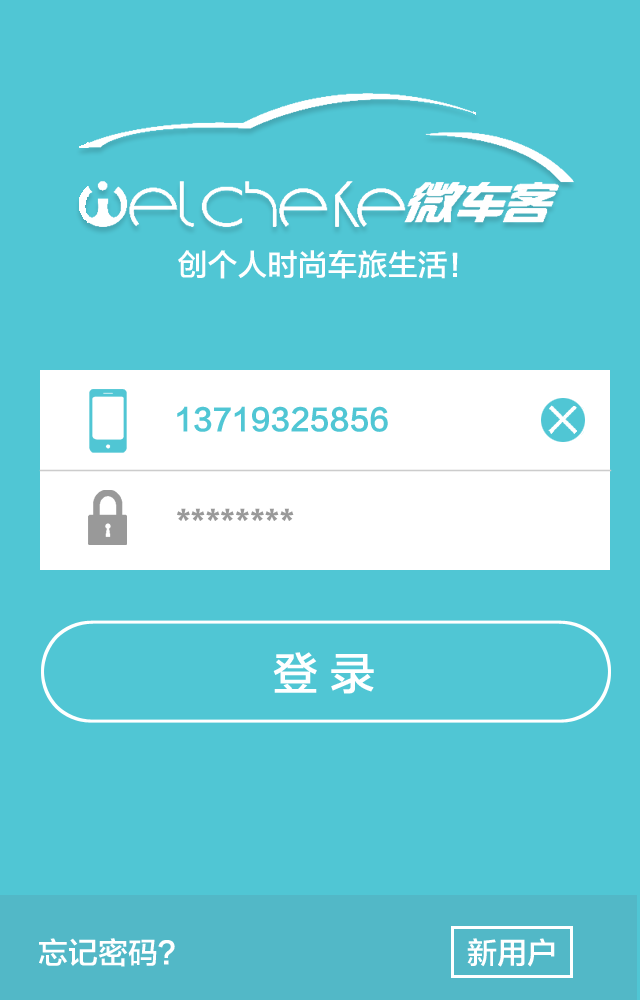
<style>
.page{position:relative;width:640px;height:1000px;background:#50c6d4}
.page>*{position:absolute;margin:0}
.t1{font:30px "FZLTZHK--GBK1-0";color:#ffffff}
.t2{font:30px "FZLTZHK--GBK1-0";color:#50c6d4}
.t3{font:30px "FZLTZHK--GBK1-0";color:#999999}
.t4{font:45px "FZLTZHK--GBK1-0";color:#ffffff}
</style>
<div class="page">
<p class="t1" style="left:178px;top:250px;width:280px;height:29px">创个人时尚车旅生活！</p>
<p class="t2" style="left:177px;top:406px;width:211px;height:26px">13719325856</p>
<p class="t3" style="left:177px;top:508px;width:117px;height:13px">********</p>
<p class="t4" style="left:273px;top:652px;width:101px;height:42px">登 录</p>
<p class="t1" style="left:39px;top:938px;width:136px;height:29px">忘记密码?</p>
<p class="t1" style="left:467px;top:938px;width:88px;height:29px">新用户</p>
</div>
